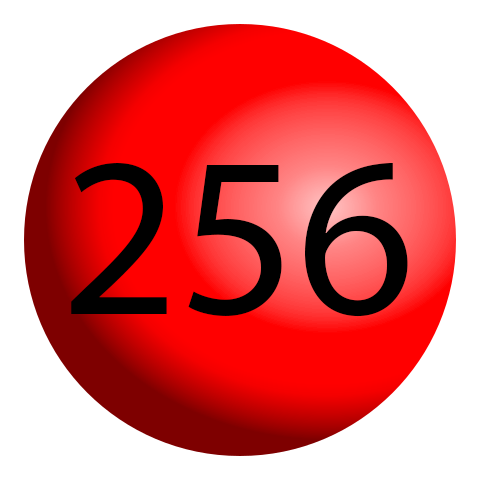
<style>
.page{position:relative;width:480px;height:480px;background:#ffffff}
.page>*{position:absolute;margin:0}
.t1{font:230px "MyriadPro-Regular";color:#000000}
</style>
<div class="page">
<p class="t1" style="left:71px;top:163px;width:337px;height:154px">256</p>
</div>
